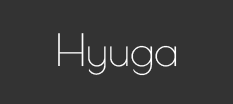
<style>
.page{position:relative;width:233px;height:104px;background:#333333}
.page>*{position:absolute;margin:0}
.t1{font:43.4px "PoiretOne-Regular";color:#ffffff}
</style>
<div class="page">
<p class="t1" style="left:58px;top:33px;width:119px;height:43px">Hyuga</p>
</div>
